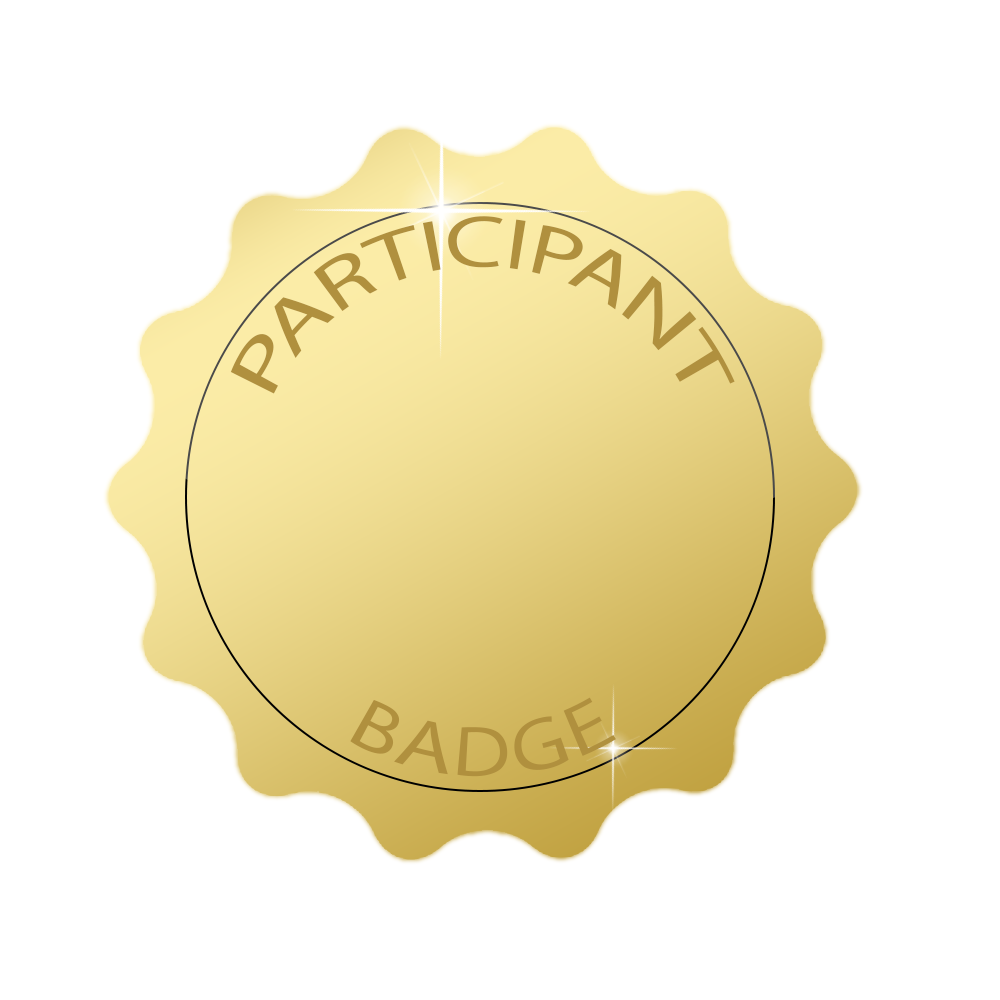
<style>
.page{position:relative;width:1000px;height:1000px;background:#ffffff}
.page>*{position:absolute;margin:0}
.t1{font:72px "MyriadPro-Regular";color:#b0903e}
</style>
<div class="page">
<p class="t1" style="left:230px;top:216px;width:505px;height:178px">PARTICIPANT</p>
<p class="t1" style="left:350px;top:697px;width:266px;height:80px">BADGE</p>
</div>
